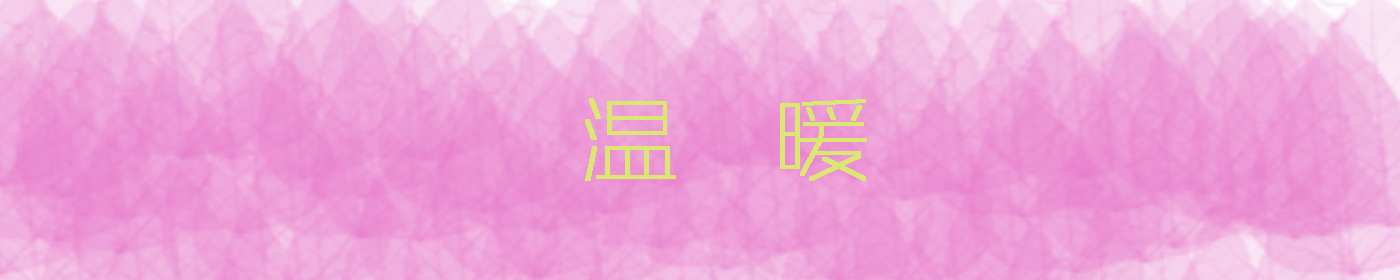
<style>
.page{position:relative;width:1400px;height:280px}
.page>*{position:absolute;margin:0}
.t1{font:100px "BigruixianthinGB1.0";letter-spacing:-0.05em;color:#dae772;font-weight:bold}
</style>
<div class="page">
<p class="t1" style="left:585px;top:98px;width:282px;height:83px">温  暖</p>
</div>
